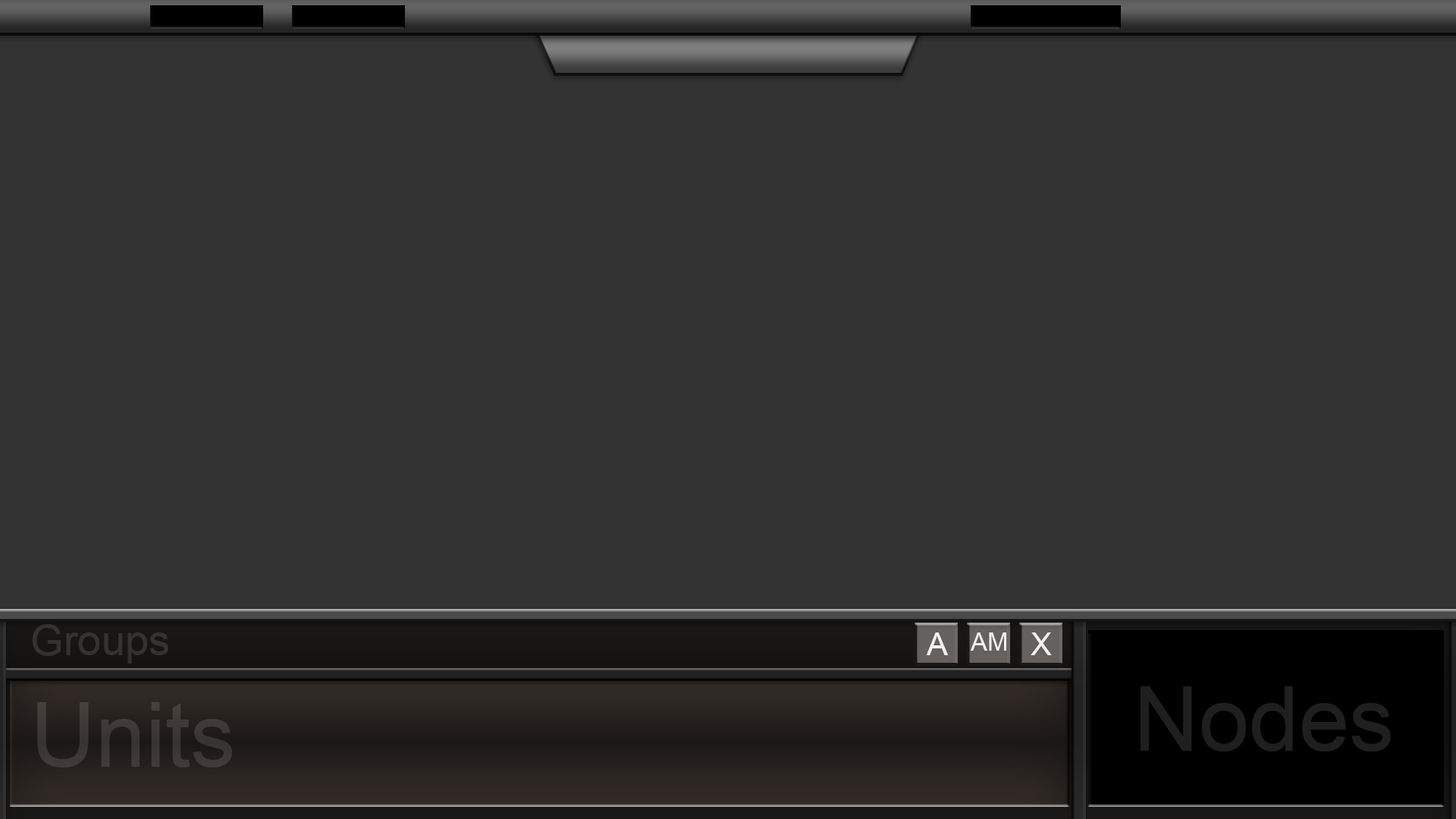
<style>
.page{position:relative;width:1456px;height:819px;background:#333333}
.page>*{position:absolute;margin:0}
.t1{font:42.7px "ArialMT";color:#333331}
.t2{font:31.8px "ArialMT";color:#f3f3f3}
.t3{font:25.3px "ArialMT";color:#f3f3f3}
.t4{font:90.1px "ArialMT";color:#1f1f1f}
.t5{font:90.1px "ArialMT";color:#3d3937}
</style>
<div class="page">
<p class="t1" style="left:33px;top:624px;width:135px;height:40px">Groups</p>
<p class="t2" style="left:926px;top:632px;width:22px;height:23px">A</p>
<p class="t3" style="left:971px;top:632px;width:35px;height:19px">AM</p>
<p class="t2" style="left:1031px;top:632px;width:21px;height:23px">X</p>
<p class="t4" style="left:1141px;top:686px;width:250px;height:65px">Nodes</p>
<p class="t5" style="left:37px;top:702px;width:195px;height:65px">Units</p>
</div>
